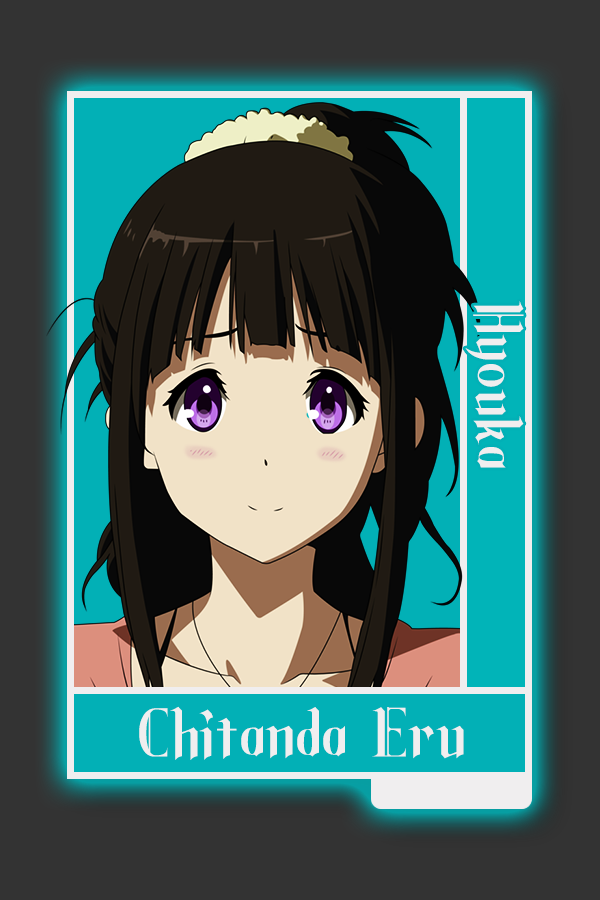
<style>
.page{position:relative;width:600px;height:900px;background:#333333}
.page>*{position:absolute;margin:0}
.t1{font:70.1px "Hangyaku";color:#f0eeef}
.t2{font:75px "Hangyaku";color:#f0eeef}
</style>
<div class="page">
<p class="t1" style="left:465px;top:301px;width:59px;height:167px;rotate:90deg">Hyouka</p>
<p class="t2" style="left:139px;top:706px;width:325px;height:54px">Chitanda Eru</p>
</div>
